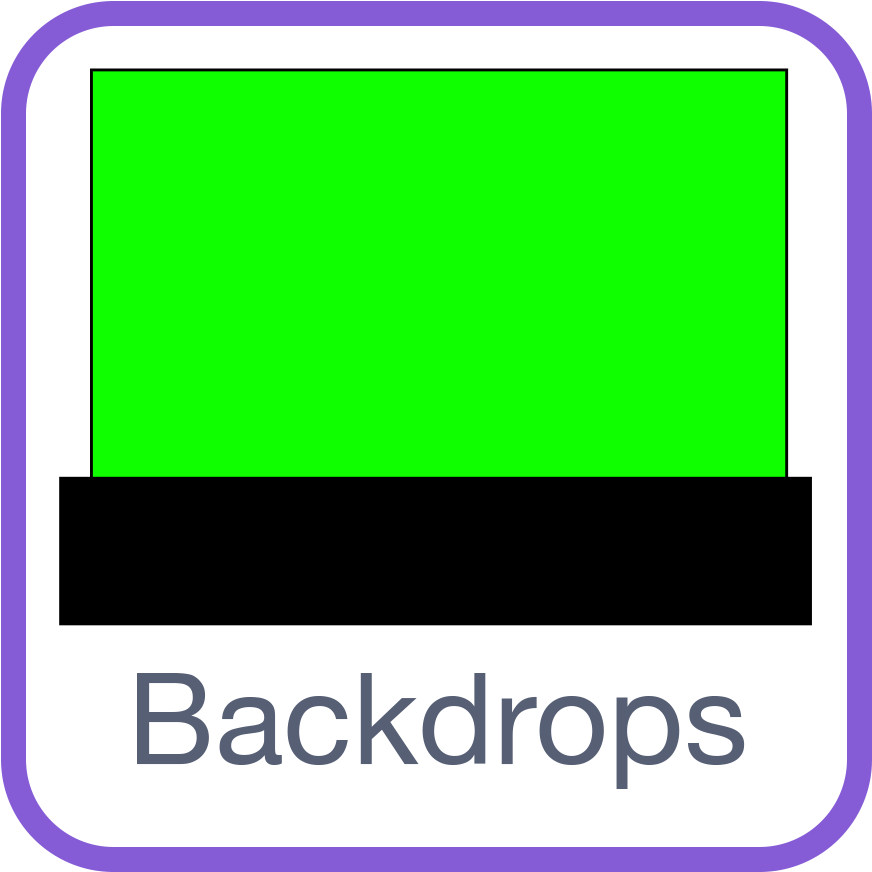
<style>
.page{position:relative;width:872px;height:872px;background:#10ff00}
.page>*{position:absolute;margin:0}
.t1{font:127.2px "HelveticaNeue";color:#575f75}
</style>
<div class="page">
<p class="t1" style="left:137px;top:673px;width:608px;height:116px">Backdrops</p>
</div>
